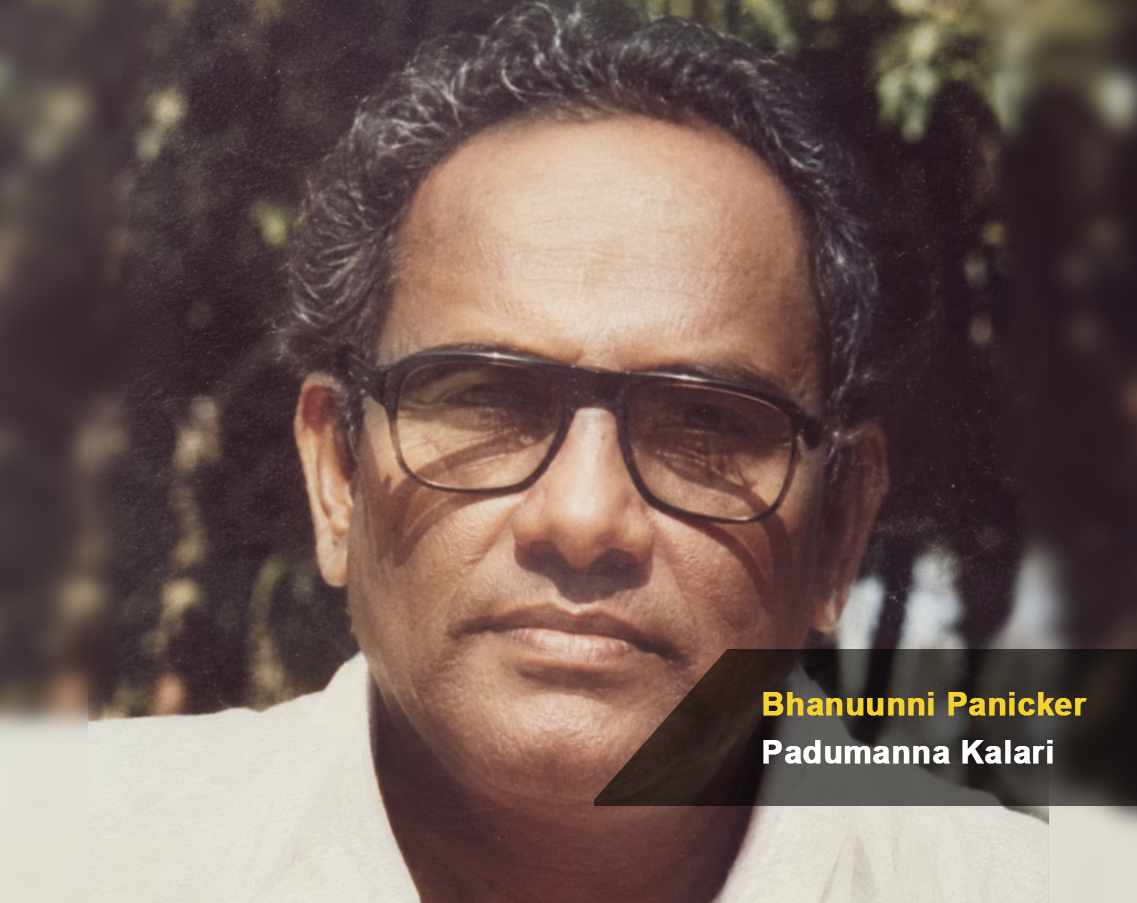
<style>
.page{position:relative;width:1137px;height:903px}
.page>*{position:absolute;margin:0}
.t1{font:32px/48px "Arial-BoldMT";color:#f5d22e;font-weight:bold}
.t2{font:32px/48px "Arial-BoldMT";color:#ffffff;font-weight:bold}
</style>
<div class="page">
<p class="t1" style="left:763px;top:692px;width:324px;height:72px;text-align:right">Bhanuunni Panicker<br><span class="t2">Padumanna Kalari</span></p>
</div>
